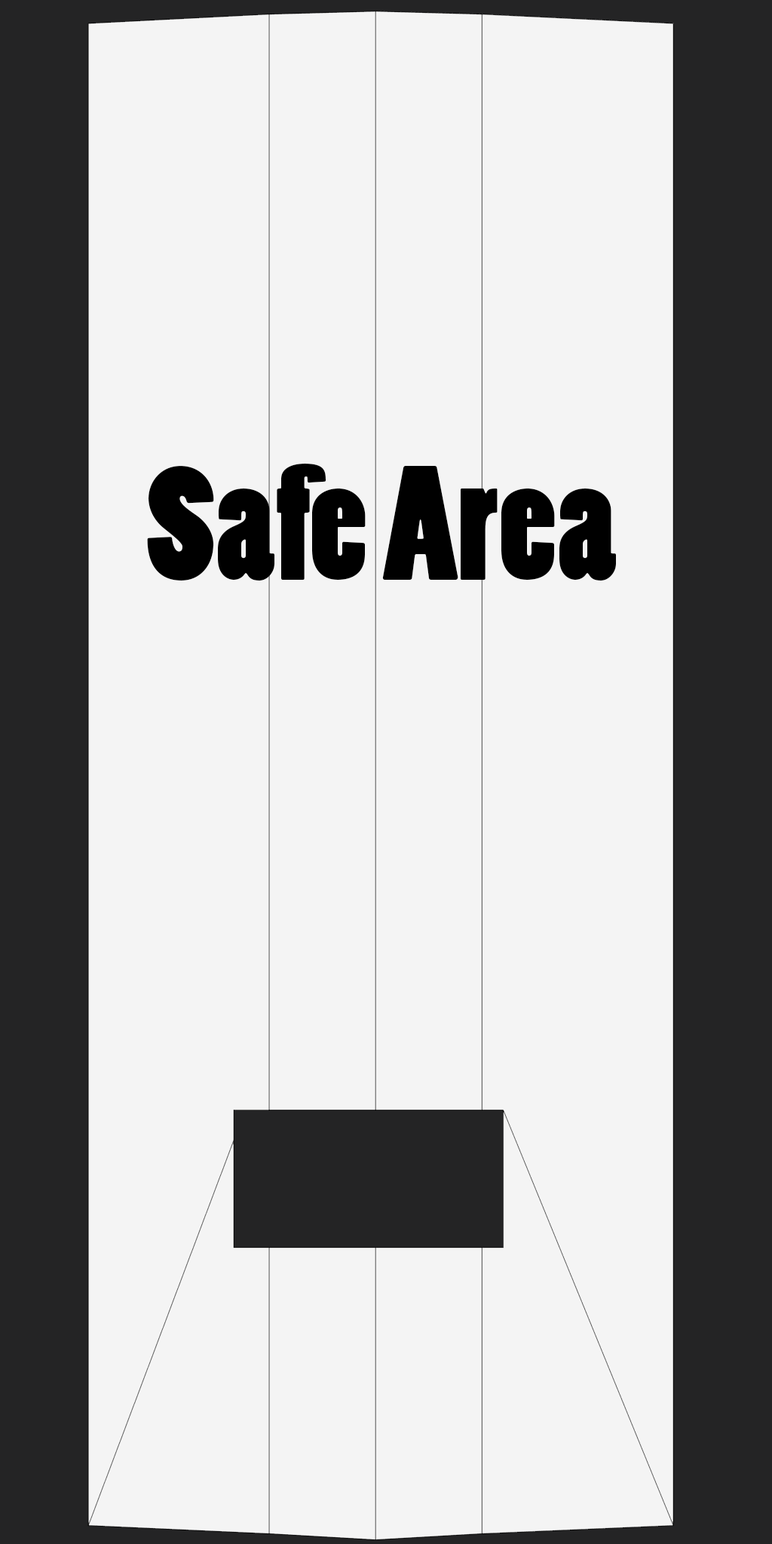
<style>
.page{position:relative;width:772px;height:1544px;background:#f4f4f4}
.page>*{position:absolute;margin:0}
.t1{font:152.3px "PoplarStd";color:#000000}
</style>
<div class="page">
<p class="t1" style="left:147px;top:464px;width:469px;height:117px">Safe Area</p>
</div>
